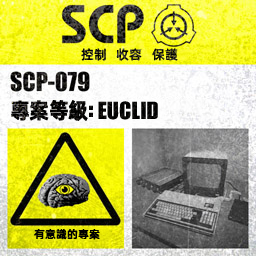
<style>
.page{position:relative;width:256px;height:256px}
.page>*{position:absolute;margin:0}
.t1{font:13px "AlibabaPuHuiTiM"}
.t2{font:26px "URWImpactW01-Bold";letter-spacing:0.02em;color:#000000}
.t3{font:22px "AlibabaPuHuiTiB";letter-spacing:-0.02em;color:#000000;font-weight:bold;scale:0.9 1}
.t4{font:31px "URWImpactW01-Bold";color:#000000}
.t5{font:11px "AlibabaPuHuiTiM";letter-spacing:0.02em;color:#000000}
</style>
<div class="page">
<p class="t1" style="left:81px;top:48px;width:97px;height:13px">控制   收容   保護</p>
<p class="t2" style="left:11px;top:100px;width:147px;height:21px"><span class="t3">專案等級</span><span class="t4">: </span>EUCLID</p>
<p class="t5" style="left:34px;top:229px;width:66px;height:11px">有意識的專案</p>
</div>
